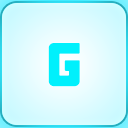
<style>
.page{position:relative;width:128px;height:128px}
.page>*{position:absolute;margin:0}
.t1{font:72px "UyghurDemo";color:#00f0fc;font-variant:small-caps;font-weight:bold}
</style>
<div class="page">
<p class="t1" style="left:48px;top:43px;width:32px;height:44px">g</p>
</div>
